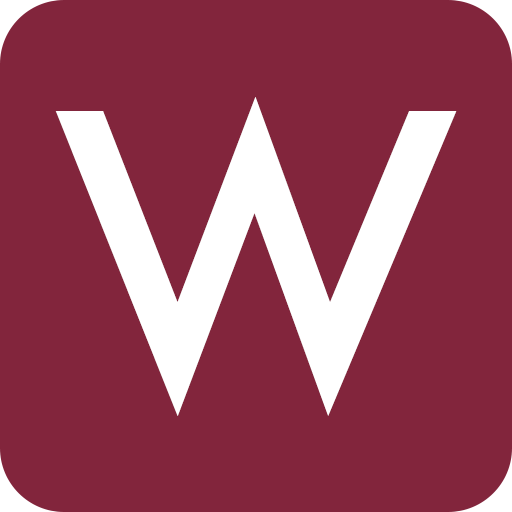
<style>
.page{position:relative;width:512px;height:512px;background:#82253c}
.page>*{position:absolute;margin:0}
.t1{font:380px "Futura-Medium";color:#ffffff}
</style>
<div class="page">
<p class="t1" style="left:55px;top:97px;width:402px;height:319px">W</p>
</div>
